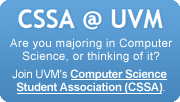
<style>
.page{position:relative;width:180px;height:102px}
.page>*{position:absolute;margin:0}
.t1{font:11.5px/13px "ArialMT";letter-spacing:0.03em;color:#ffffff}
.t2{font:11.5px/18px "ArialMT";letter-spacing:-0.025em;color:#ffffff}
.t3{font:11.5px/18px "Arial-BoldMT";letter-spacing:-0.025em;color:#ffffff}
.t4{font:11.5px/13px "Arial-BoldMT";letter-spacing:-0.025em;color:#ffffff}
.t5{font:11.5px/13px "ArialMT";letter-spacing:-0.025em;color:#ffffff}
</style>
<div class="page">
<p class="t1" style="left:10px;top:38px;width:163px;height:56px;text-align:center">Are you majoring in Computer<br>Science, or thinking of it?<br><span class="t2">Join UVM's </span><span class="t3">Computer Science <br></span><span class="t4">Student Association (CSSA)</span><span class="t5">.</span></p>
</div>
